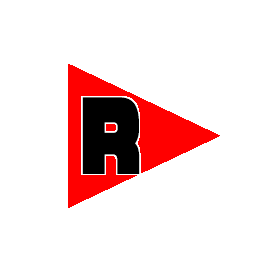
<style>
.page{position:relative;width:256px;height:256px;background:#ffffff}
.page>*{position:absolute;margin:0}
.t1{font:93.6px "VDL-LogoJrBlack-Black";letter-spacing:0.11em;color:#000000;scale:0.77 1}
</style>
<div class="page">
<p class="t1" style="left:82px;top:97px;width:58px;height:77px">R</p>
</div>
